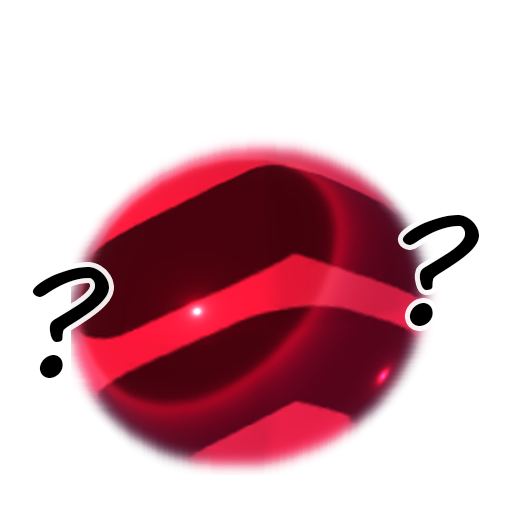
<style>
.page{position:relative;width:512px;height:512px;background:#ffffff}
.page>*{position:absolute;margin:0}
.t1{font:156px "MVBoli";color:#000000}
</style>
<div class="page">
<p class="t1" style="left:402px;top:215px;width:77px;height:111px">?</p>
<p class="t1" style="left:32px;top:267px;width:77px;height:111px">?</p>
</div>
